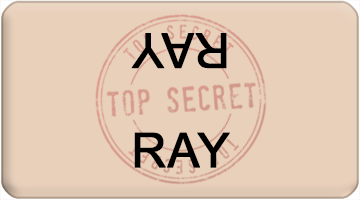
<style>
.page{position:relative;width:360px;height:200px;background:#e8d0bb}
.page>*{position:absolute;margin:0}
.t1{font:48px "ArialMT";color:#000000;font-weight:bold}
</style>
<div class="page">
<p class="t1" style="left:131px;top:33px;width:96px;height:36px;rotate:180deg">RAY</p>
<p class="t1" style="left:134px;top:132px;width:96px;height:36px">RAY</p>
</div>
